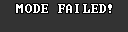
<style>
.page{position:relative;width:128px;height:32px;background:#333333}
.page>*{position:absolute;margin:0}
.t1{font:12px "Terminal";letter-spacing:0.075em;color:#ffffff}
</style>
<div class="page">
<p class="t1" style="left:16px;top:4px;width:96px;height:9px">MODE FAILED!</p>
</div>
